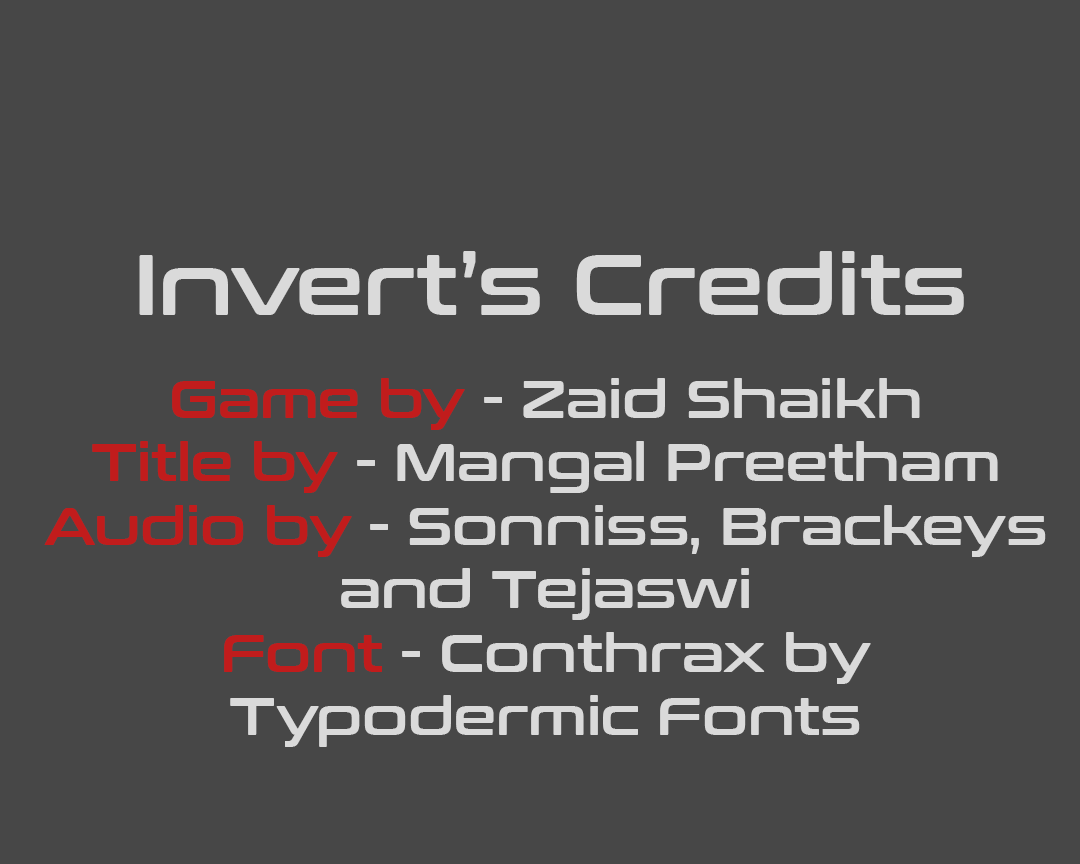
<style>
.page{position:relative;width:1080px;height:864px;background:#474747}
.page>*{position:absolute;margin:0}
.t1{font:84.7px "ConthraxSb-Regular";color:#dadada}
.t2{font:52.9px "ConthraxSb-Regular";color:#dadada}
.t3{font:52.9px "ConthraxSb-Regular";color:#c11c1c}
</style>
<div class="page">
<p class="t1" style="left:139px;top:251px;width:825px;height:64px">Invert’s Credits</p>
<p class="t2" style="left:44px;top:378px;width:1002px;height:369px;text-align:center"><span class="t3">Game by </span>- Zaid Shaikh<br><span class="t3">Title by</span> - Mangal Preetham<br><span class="t3">Audio by</span> - Sonniss, Brackeys and Tejaswi<br><span class="t3">Font</span> - Conthrax by <br>Typodermic Fonts</p>
</div>
